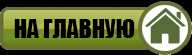
<style>
.page{position:relative;width:192px;height:55px;background:#000000}
.page>*{position:absolute;margin:0}
.t1{font:23.7px "Impact";color:#000000}
</style>
<div class="page">
<p class="t1" style="left:14px;top:19px;width:121px;height:19px">НА ГЛАВНУЮ</p>
</div>
